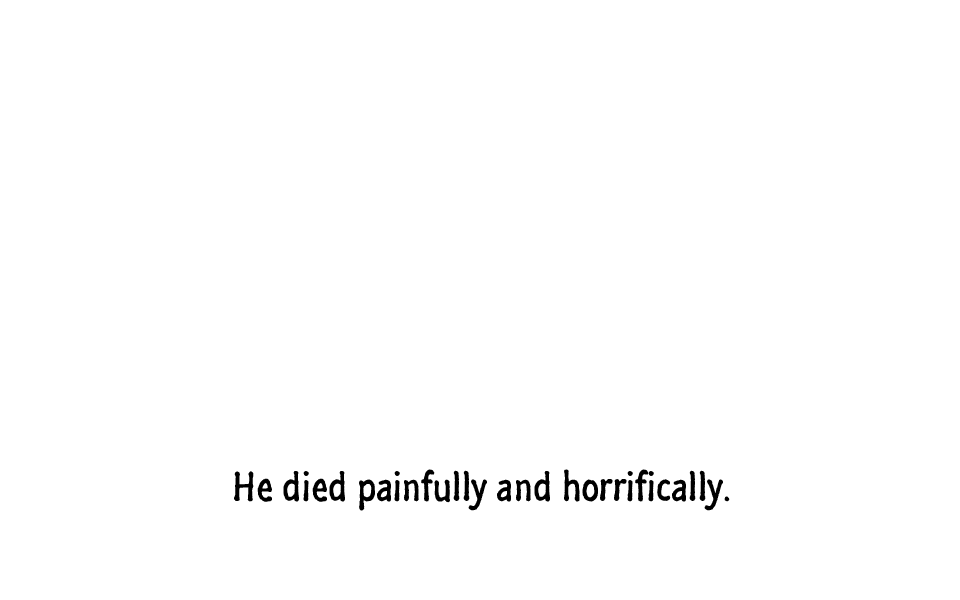
<style>
.page{position:relative;width:960px;height:600px;background:#ffffff}
.page>*{position:absolute;margin:0}
.t1{font:42px "SegoeMarker";color:#000000}
</style>
<div class="page">
<p class="t1" style="left:234px;top:469px;width:496px;height:42px">He died painfully and horrifically.</p>
</div>
